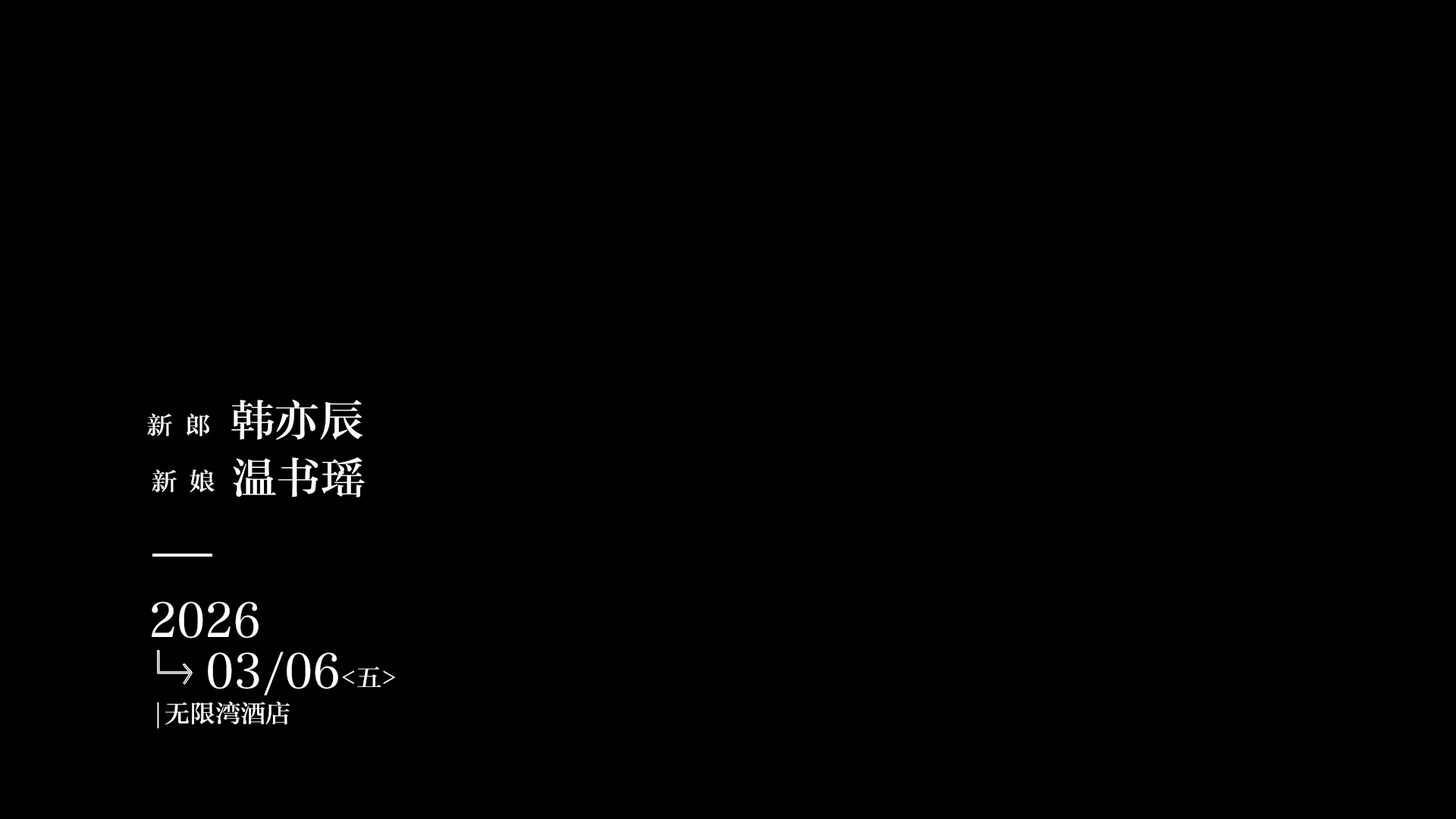
<style>
.page{position:relative;width:1456px;height:819px;background:#000000}
.page>*{position:absolute;margin:0}
.t1{font:44.2px "FZZYSK--GBK1-0";color:#ffffff;text-transform:uppercase}
.t2{font:25.3px "FZZYSK--GBK1-0";color:#ffffff;text-transform:uppercase}
</style>
<div class="page">
<p class="t1" style="left:231px;top:400px;width:132px;height:40px">韩亦辰</p>
<p class="t2" style="left:147px;top:413px;width:62px;height:24px">新 郎</p>
<p class="t1" style="left:233px;top:457px;width:132px;height:40px">温书瑶</p>
<p class="t2" style="left:152px;top:469px;width:63px;height:24px">新 娘</p>
<p class="t1" style="left:152px;top:601px;width:107px;height:38px">2026</p>
<p class="t1" style="left:208px;top:651px;width:187px;height:44px">03/06<span class="t2">&lt;五&gt;</span></p>
<p class="t2" style="left:157px;top:701px;width:133px;height:28px">|无限湾酒店</p>
</div>
